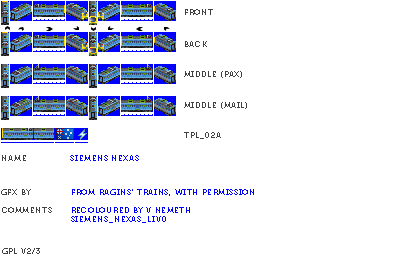
<style>
.page{position:relative;width:400px;height:270px;background:#ffffff}
.page>*{position:absolute;margin:0}
.t1{font:8px "Museo700-Regular";letter-spacing:0.075em;color:#404040;text-transform:uppercase}
.t2{font:8px "Museo700-Regular";letter-spacing:0.075em;color:#0000ff;text-transform:uppercase}
</style>
<div class="page">
<p class="t1" style="left:185px;top:9px;width:28px;height:6px">front</p>
<p class="t1" style="left:185px;top:41px;width:22px;height:6px">back</p>
<p class="t1" style="left:184px;top:71px;width:58px;height:7px">middle (pax)</p>
<p class="t1" style="left:184px;top:102px;width:63px;height:7px">middle (mail)</p>
<p class="t1" style="left:184px;top:132px;width:37px;height:7px">tpl_02a</p>
<p class="t1" style="left:2px;top:155px;width:24px;height:6px">name</p>
<p class="t2" style="left:70px;top:155px;width:69px;height:6px">Siemens Nexas</p>
<p class="t1" style="left:1px;top:189px;width:30px;height:6px">gfx by</p>
<p class="t2" style="left:72px;top:189px;width:182px;height:7px">from ragins' trains, with permission</p>
<p class="t1" style="left:2px;top:207px;width:50px;height:6px">comments</p>
<p class="t2" style="left:71px;top:207px;width:119px;height:16px">recoloured by v nemeth<br>Siemens_Nexas_Liv0</p>
<p class="t1" style="left:2px;top:248px;width:38px;height:6px">gpl v2/3</p>
</div>
